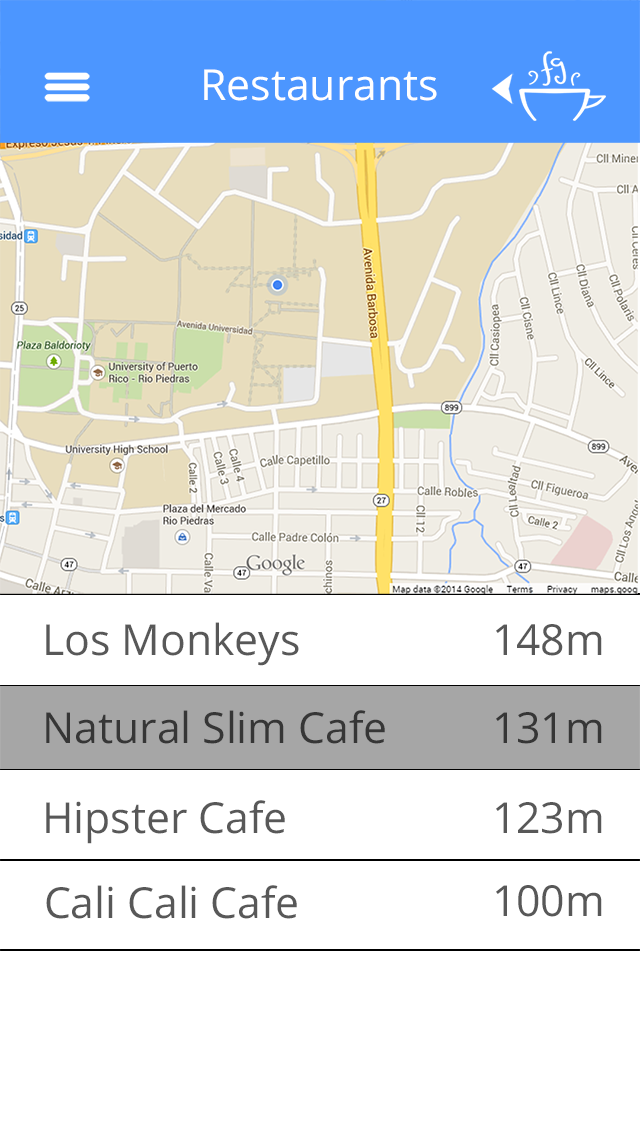
<style>
.page{position:relative;width:640px;height:1138px;background:#ffffff}
.page>*{position:absolute;margin:0}
.t1{font:42.7px "OpenSans";color:#ffffff}
.t2{font:42.7px "OpenSans";color:#585858}
.t3{font:42.7px "OpenSans";color:#363636}
</style>
<div class="page">
<p class="t1" style="left:204px;top:69px;width:233px;height:32px">Restaurants</p>
<p class="t2" style="left:46px;top:622px;width:253px;height:44px">Los Monkeys</p>
<p class="t2" style="left:496px;top:624px;width:106px;height:32px">148m</p>
<p class="t3" style="left:46px;top:710px;width:339px;height:34px">Natural Slim Cafe</p>
<p class="t3" style="left:496px;top:712px;width:106px;height:32px">131m</p>
<p class="t2" style="left:46px;top:800px;width:239px;height:44px">Hipster Cafe</p>
<p class="t2" style="left:496px;top:802px;width:106px;height:32px">123m</p>
<p class="t2" style="left:46px;top:885px;width:251px;height:34px">Cali Cali Cafe</p>
<p class="t2" style="left:496px;top:885px;width:106px;height:32px">100m</p>
</div>
